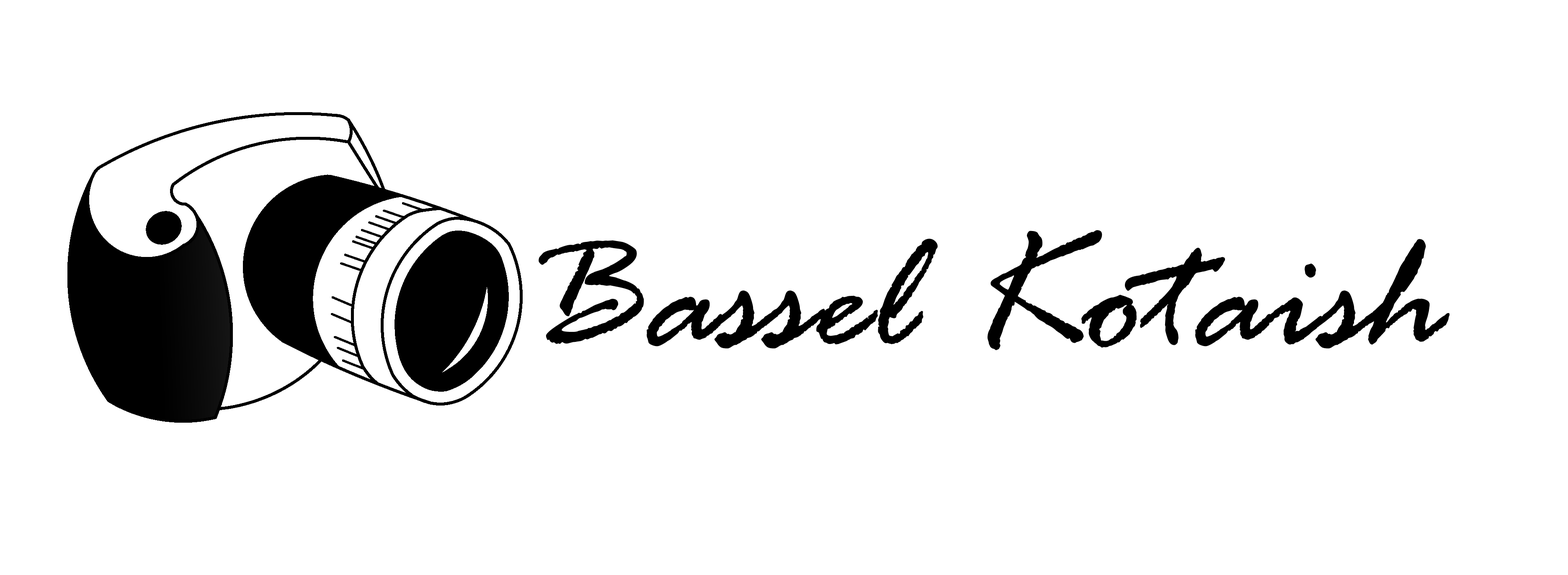
<style>
.page{position:relative;width:1568px;height:575px;background:#ffffff}
.page>*{position:absolute;margin:0}
.t1{font:174.5px "RageItalic";color:#000000}
</style>
<div class="page">
<p class="t1" style="left:539px;top:230px;width:910px;height:121px">Bassel Kotaish</p>
</div>
